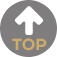
<style>
.page{position:relative;width:57px;height:57px;background:#7f7d7d}
.page>*{position:absolute;margin:0}
.t1{font:16px "Montserrat-Bold";color:#ccab6f}
</style>
<div class="page">
<p class="t1" style="left:12px;top:38px;width:35px;height:13px">TOP</p>
</div>
